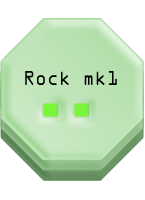
<style>
.page{position:relative;width:145px;height:200px;background:#ffffff}
.page>*{position:absolute;margin:0}
.t1{font:18px "OCRAStd";color:#000000;scale:0.92 1}
</style>
<div class="page">
<p class="t1" style="left:25px;top:71px;width:92px;height:14px">Rock mk1</p>
</div>
